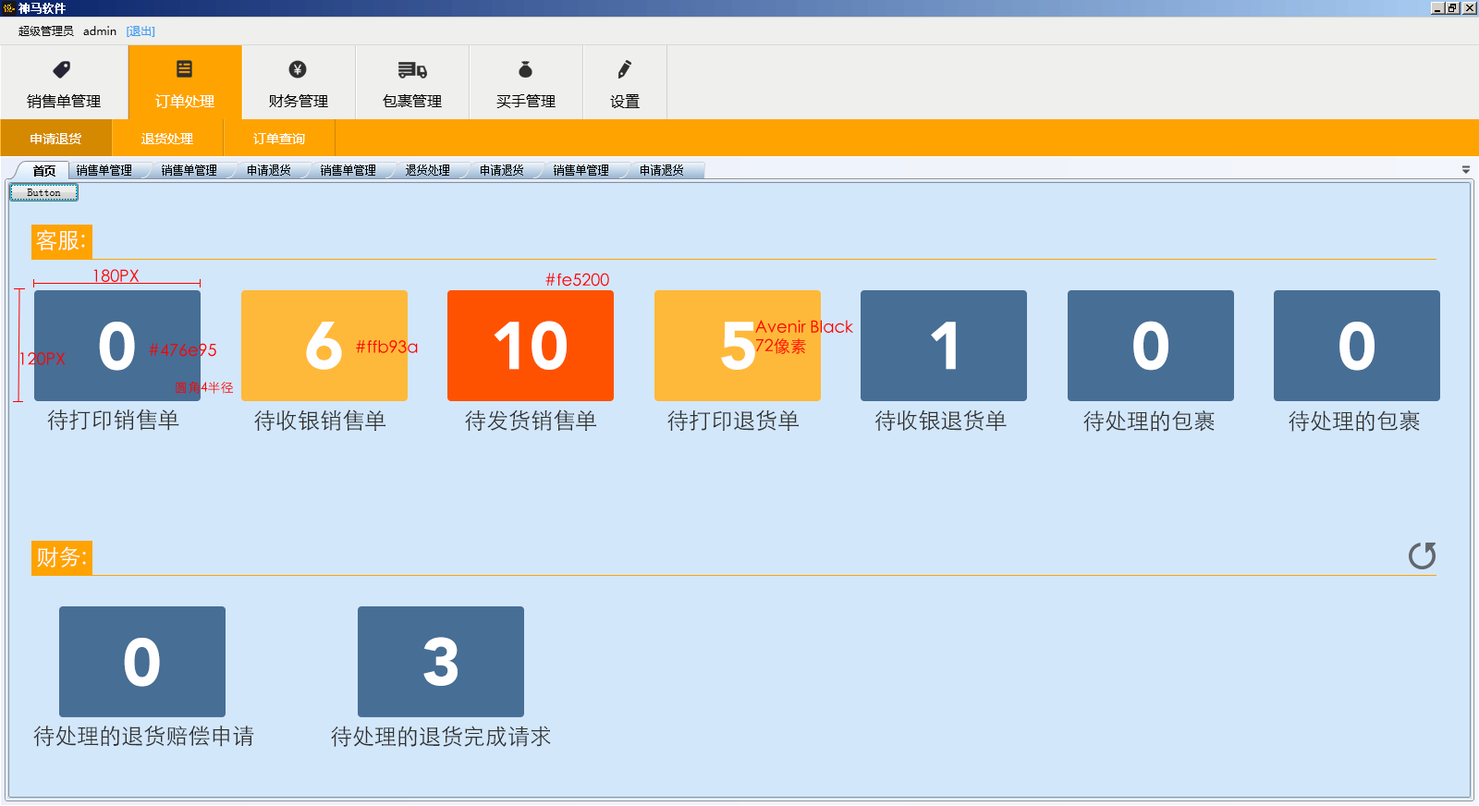
<style>
.page{position:relative;width:1479px;height:806px;background:#d3e7fb}
.page>*{position:absolute;margin:0}
.t1{font:22.2px "STHeitiSC-Light";color:#ffffff}
.t2{font:16.6px "STHeitiSC-Light";color:#ff0000}
.t3{font:66.6px "Avenir-Black";color:#ffffff}
.t4{font:16.6px/18.5px "STHeitiSC-Light";color:#ff0000}
.t5{font:12.9px "STHeitiSC-Light";color:#ff0000}
.t6{font:22.2px "STHeitiSC-Light";color:#303030}
.t7{font:66.5px "Avenir-Black";color:#ffffff}
</style>
<div class="page">
<p class="t1" style="left:36px;top:229px;width:49px;height:22px">客服:</p>
<p class="t2" style="left:93px;top:269px;width:46px;height:13px">180PX</p>
<p class="t2" style="left:545px;top:273px;width:64px;height:14px">#fe5200</p>
<p class="t3" style="left:99px;top:322px;width:36px;height:49px">0</p>
<p class="t3" style="left:306px;top:322px;width:36px;height:48px">6</p>
<p class="t3" style="left:494px;top:321px;width:73px;height:49px">10</p>
<p class="t3" style="left:721px;top:322px;width:34px;height:48px">5</p>
<p class="t4" style="left:755px;top:320px;width:98px;height:34px">Avenir Black   <br>72像素</p>
<p class="t3" style="left:931px;top:322px;width:25px;height:48px">1</p>
<p class="t3" style="left:1133px;top:321px;width:36px;height:50px">0</p>
<p class="t3" style="left:1340px;top:322px;width:35px;height:49px">0</p>
<p class="t2" style="left:356px;top:340px;width:62px;height:13px">#ffb93a</p>
<p class="t2" style="left:20px;top:352px;width:46px;height:13px">120PX</p>
<p class="t2" style="left:149px;top:343px;width:67px;height:14px">#476e95</p>
<p class="t5" style="left:176px;top:381px;width:57px;height:13px">圆角4半径</p>
<p class="t6" style="left:47px;top:409px;width:132px;height:22px">待打印销售单</p>
<p class="t6" style="left:254px;top:410px;width:132px;height:21px">待收银销售单</p>
<p class="t6" style="left:465px;top:410px;width:131px;height:21px">待发货销售单</p>
<p class="t6" style="left:667px;top:410px;width:132px;height:21px">待打印退货单</p>
<p class="t6" style="left:875px;top:410px;width:132px;height:21px">待收银退货单</p>
<p class="t6" style="left:1083px;top:410px;width:132px;height:22px">待处理的包裹</p>
<p class="t6" style="left:1289px;top:410px;width:131px;height:22px">待处理的包裹</p>
<p class="t1" style="left:37px;top:546px;width:49px;height:22px">财务:</p>
<p class="t7" style="left:124px;top:638px;width:36px;height:49px">0</p>
<p class="t7" style="left:423px;top:637px;width:35px;height:49px">3</p>
<p class="t6" style="left:33px;top:725px;width:221px;height:22px">待处理的退货赔偿申请</p>
<p class="t6" style="left:331px;top:726px;width:220px;height:21px">待处理的退货完成请求</p>
</div>
